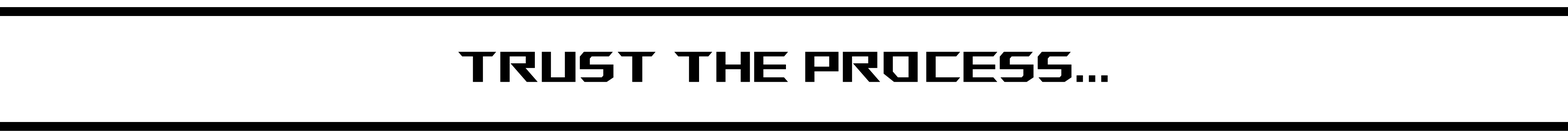
<style>
.page{position:relative;width:1568px;height:138px;background:#ffffff}
.page>*{position:absolute;margin:0}
.t1{font:42.6px "AniMeMatrix-MB_EN";color:#000000;font-weight:bold}
</style>
<div class="page">
<p class="t1" style="left:458px;top:51px;width:650px;height:31px">trust the process...</p>
</div>
